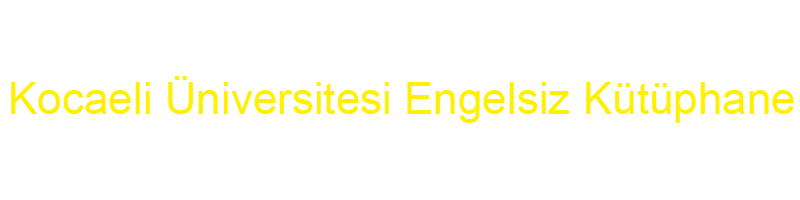
<style>
.page{position:relative;width:800px;height:200px;background:#ffffff}
.page>*{position:absolute;margin:0}
.t1{font:44px "ArialMT";color:#fff000}
</style>
<div class="page">
<p class="t1" style="left:11px;top:76px;width:783px;height:47px">Kocaeli Üniversitesi Engelsiz Kütüphane</p>
</div>
